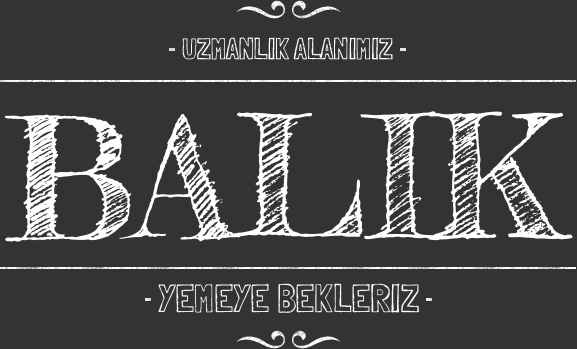
<style>
.page{position:relative;width:577px;height:349px;background:#333333}
.page>*{position:absolute;margin:0}
.t1{font:29.7px "LondrinaSketch-Regular";color:#fefefe}
.t2{font:167px "FrederickatheGreat-Regular";color:#fefefe}
.t3{font:39.5px "LondrinaSketch-Regular";color:#fefefe}
</style>
<div class="page">
<p class="t1" style="left:182px;top:37px;width:211px;height:23px">UZMANLIK ALANIMIZ</p>
<p class="t2" style="left:4px;top:111px;width:569px;height:131px">BALIK</p>
<p class="t3" style="left:158px;top:283px;width:261px;height:30px">YEMEYE BEKLERIZ</p>
</div>
